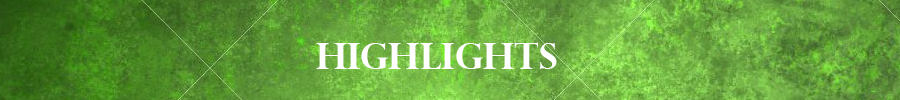
<style>
.page{position:relative;width:900px;height:100px}
.page>*{position:absolute;margin:0}
.t1{font:36px "PerpetuaTitlingMT-Bold";color:#fefefe}
</style>
<div class="page">
<p class="t1" style="left:316px;top:42px;width:241px;height:27px">Highlights</p>
</div>
